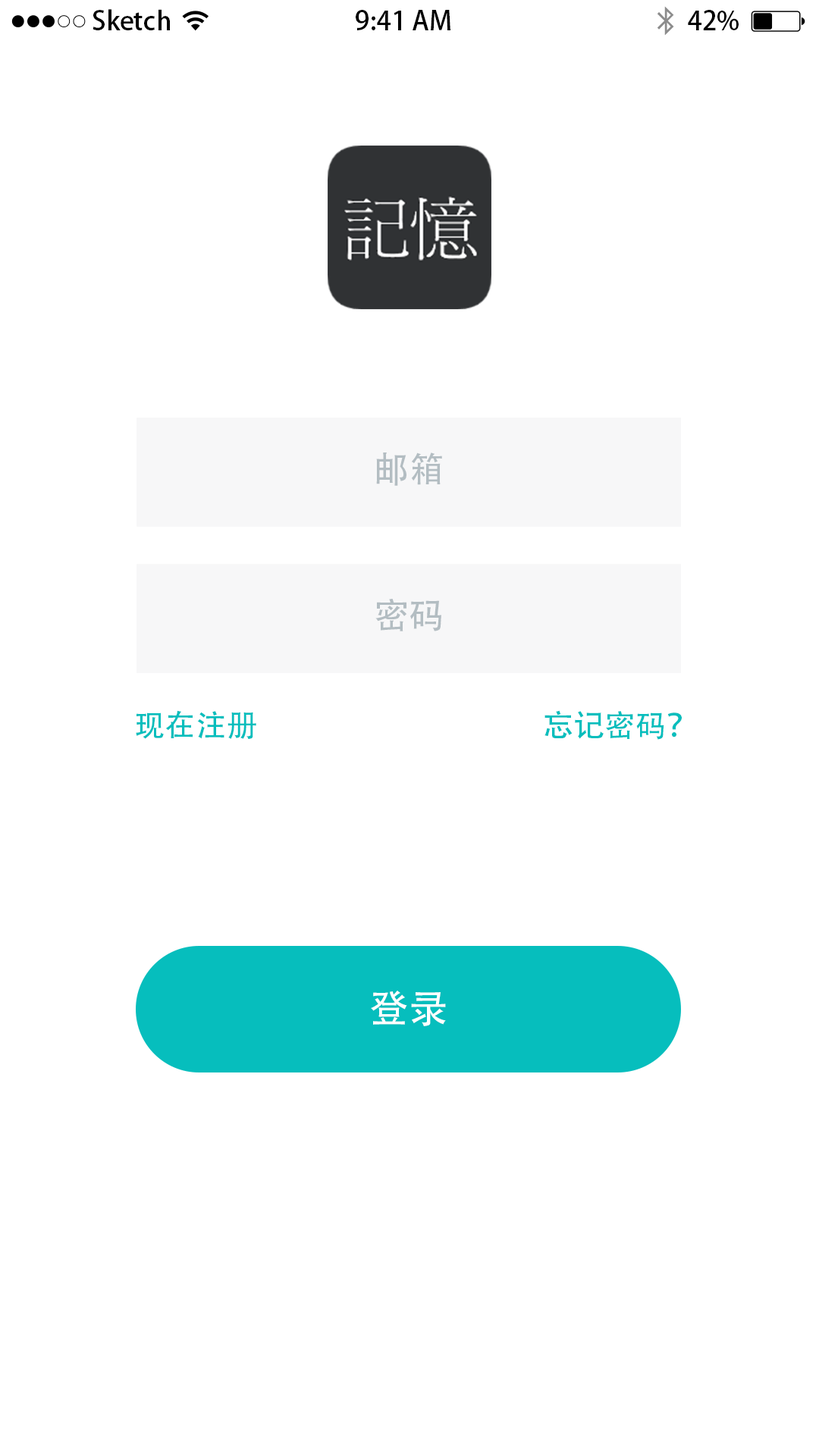
<style>
.page{position:relative;width:819px;height:1456px;background:#ffffff}
.page>*{position:absolute;margin:0}
.t1{font:26.2px "AdobeHeitiStd-Regular";color:#000000}
.t2{font:34.9px "AdobeHeitiStd-Regular";letter-spacing:0.015em;color:#b3bdc2}
.t3{font:34.9px "AdobeHeitiStd-Regular";color:#b3bdc2}
.t4{font:30.6px "AdobeHeitiStd-Regular";letter-spacing:0.01em;color:#06bebd}
.t5{font:39.3px "AdobeHeitiStd-Regular";letter-spacing:-0.005em;color:#ffffff}
</style>
<div class="page">
<p class="t1" style="left:92px;top:9px;width:78px;height:21px">Sketch</p>
<p class="t1" style="left:356px;top:10px;width:94px;height:20px">9:41 AM</p>
<p class="t1" style="left:688px;top:10px;width:50px;height:21px">42%</p>
<p class="t2" style="left:376px;top:453px;width:66px;height:33px">邮箱</p>
<p class="t3" style="left:375px;top:599px;width:66px;height:33px">密码</p>
<p class="t4" style="left:136px;top:710px;width:120px;height:29px">现在注册</p>
<p class="t4" style="left:544px;top:710px;width:138px;height:30px">忘记密码？</p>
<p class="t5" style="left:371px;top:991px;width:75px;height:36px">登录</p>
</div>
